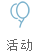
<style>
.page{position:relative;width:40px;height:55px;background:#ffffff}
.page>*{position:absolute;margin:0}
.t1{font:22.5px "SimSun";letter-spacing:0.1em;color:#666666;font-variant:small-caps}
</style>
<div class="page">
<p class="t1" style="left:7px;top:39px;width:25px;height:12px">活动</p>
</div>
